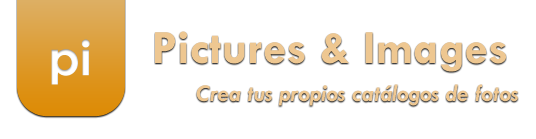
<style>
.page{position:relative;width:536px;height:139px;background:#ffffff}
.page>*{position:absolute;margin:0}
.t1{font:48px "CenturyGothic-Bold";color:#ffffff}
.t2{font:48px "TwCenMT-Bold";color:#eec791}
.t3{font:24px "TwCenMT-BoldItalic";color:#eec791}
</style>
<div class="page">
<p class="t1" style="left:51px;top:39px;width:39px;height:46px">pi</p>
<p class="t2" style="left:155px;top:31px;width:351px;height:41px">Pictures &amp; Images</p>
<p class="t3" style="left:196px;top:84px;width:322px;height:22px">Crea tus propios catálogos de fotos</p>
</div>
